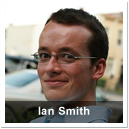
<style>
.page{position:relative;width:129px;height:129px}
.page>*{position:absolute;margin:0}
.t1{font:11px "Arial-BoldMT";letter-spacing:0.03em;color:#fffefe}
</style>
<div class="page">
<p class="t1" style="left:38px;top:106px;width:52px;height:9px">Ian Smith</p>
</div>
